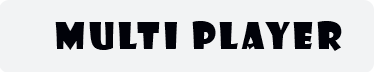
<style>
.page{position:relative;width:374px;height:72px;background:#f2f3f4}
.page>*{position:absolute;margin:0}
.t1{font:36px "ShowcardGothic-Reg";letter-spacing:0.1em;color:#010209}
</style>
<div class="page">
<p class="t1" style="left:55px;top:21px;width:287px;height:30px">MULTI PLAYER</p>
</div>
